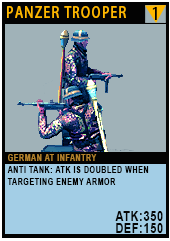
<style>
.page{position:relative;width:170px;height:241px;background:#a0b2b8}
.page>*{position:absolute;margin:0}
.t1{font:15.1px "AdobeHeitiStd-Regular";letter-spacing:0.08em;color:#ffb800;text-transform:uppercase;scale:0.86 1}
.t2{font:17.4px "AdobeHeitiStd-Regular";letter-spacing:0.08em;color:#000000;text-transform:uppercase;scale:0.86 1}
.t3{font:9.3px/12px "Arial-BoldMT";letter-spacing:0.08em;color:#020100;text-transform:uppercase;scale:0.76 1}
.t4{font:9.3px/20.2px "Arial-BoldMT";letter-spacing:0.08em;color:#b4832c;text-transform:uppercase;scale:0.76 1}
.t5{font:13.9px/12px "Arial-BoldMT";letter-spacing:0.08em;color:#050606;text-transform:uppercase;scale:0.76 1}
</style>
<div class="page">
<p class="t1" style="left:7px;top:6px;width:119px;height:12px">Panzer Trooper</p>
<p class="t2" style="left:152px;top:7px;width:5px;height:13px">1</p>
<p class="t3" style="left:7px;top:154px;width:156px;height:79px"><span class="t4">German At Infantry<br></span>Anti Tank: Atk is doubled when targeting enemy armor<br><br><br><span class="t5">atk:350<br>def:150</span></p>
</div>
